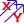
<style>
.page{position:relative;width:24px;height:24px;background:#ffffff}
.page>*{position:absolute;margin:0}
.t1{font:12px "CopperplateGothic-Bold";color:#ff0000}
.t2{font:14px "CopperplateGothic-Bold";color:#ff0000}
</style>
<div class="page">
<p class="t1" style="left:2px;top:2px;width:9px;height:8px">X</p>
<p class="t2" style="left:12px;top:13px;width:11px;height:9px">Y</p>
</div>
